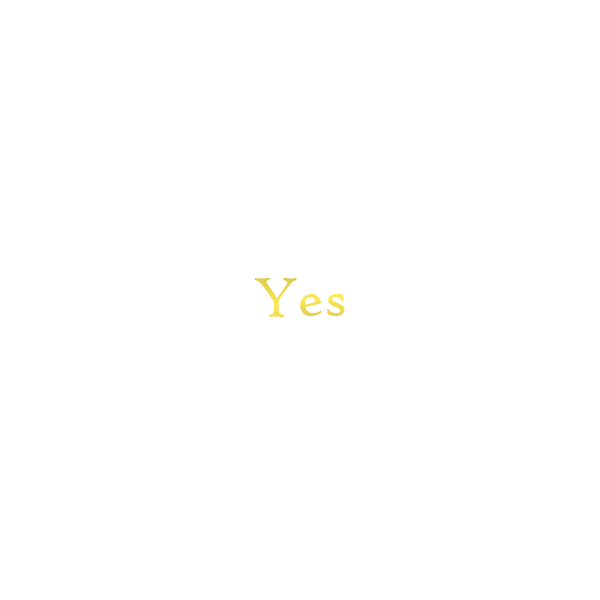
<style>
.page{position:relative;width:600px;height:600px;background:#ffffff}
.page>*{position:absolute;margin:0}
.t1{font:59.2px "HighTowerText-Reg";color:#f2dd52}
</style>
<div class="page">
<p class="t1" style="left:254px;top:278px;width:91px;height:39px">Yes</p>
</div>
